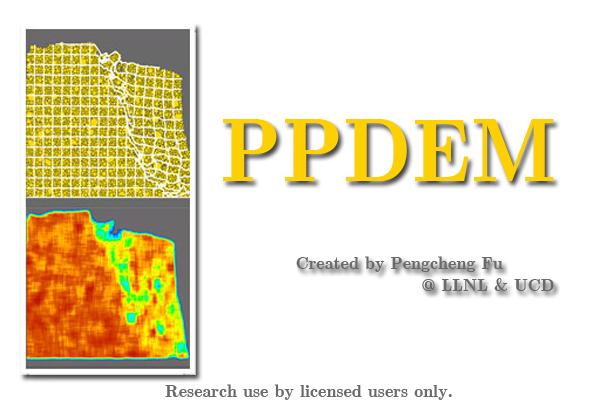
<style>
.page{position:relative;width:600px;height:400px;background:#ffffff}
.page>*{position:absolute;margin:0}
.t1{font:90px "Euclid-Bold";color:#fdd006}
.t2{font:18px "Euclid-Bold";color:#6b696c}
.t3{font:18px "Euclid-Bold";color:#696969}
</style>
<div class="page">
<p class="t1" style="left:223px;top:119px;width:331px;height:63px">PPDEM</p>
<p class="t2" style="left:296px;top:256px;width:258px;height:35px">Created by Pengcheng Fu<br>                     @ LLNL &amp; UCD</p>
<p class="t3" style="left:165px;top:384px;width:287px;height:16px">Research use by licensed users only.</p>
</div>
